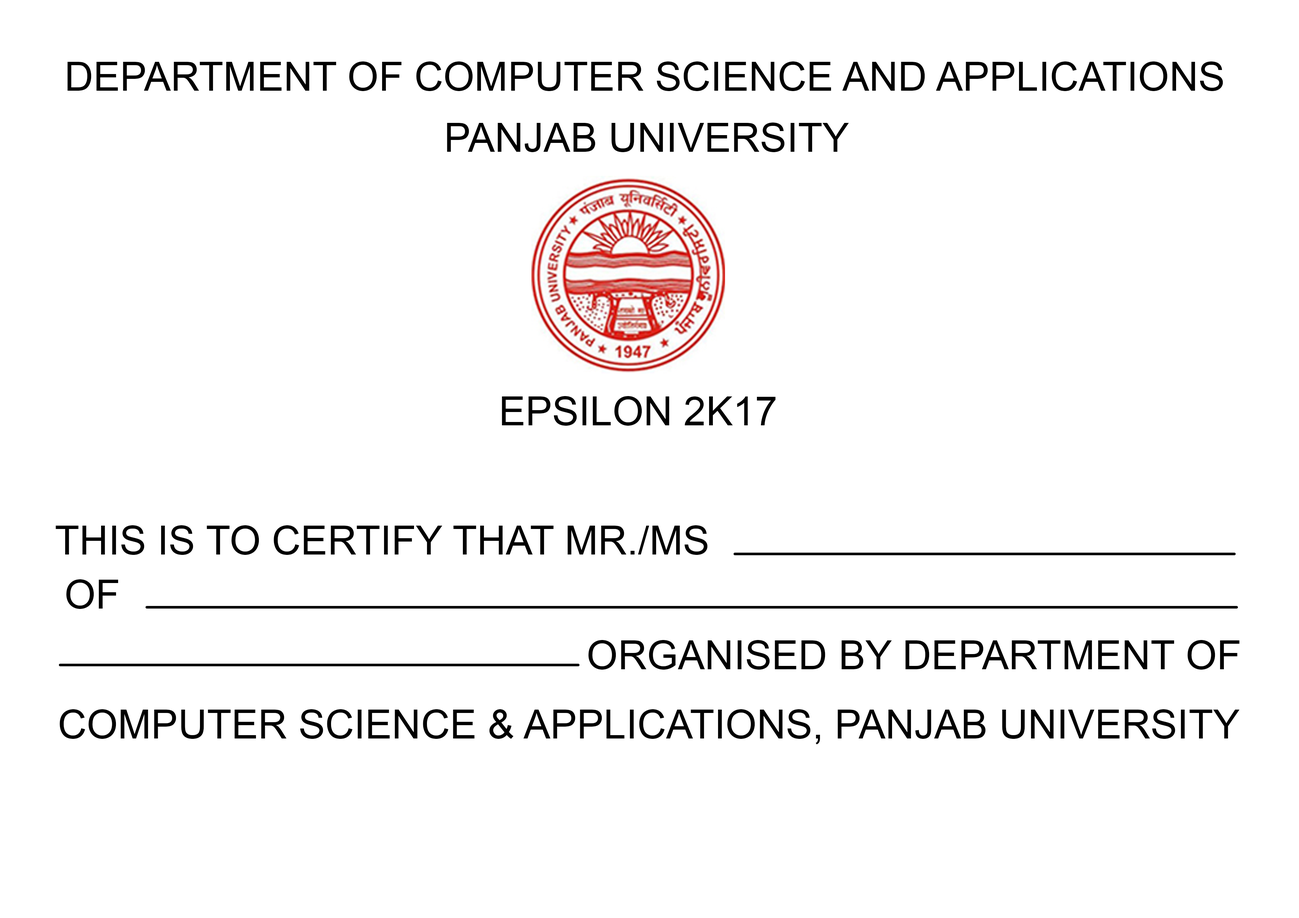
<style>
.page{position:relative;width:1299px;height:918px;background:#ffffff}
.page>*{position:absolute;margin:0}
.t1{font:40.1px "ArialMT";color:#000000}
</style>
<div class="page">
<p class="t1" style="left:67px;top:61px;width:1156px;height:30px">DEPARTMENT OF COMPUTER SCIENCE AND APPLICATIONS</p>
<p class="t1" style="left:447px;top:123px;width:402px;height:29px">PANJAB UNIVERSITY</p>
<p class="t1" style="left:502px;top:396px;width:274px;height:30px">EPSILON 2K17</p>
<p class="t1" style="left:56px;top:525px;width:651px;height:30px">THIS IS TO CERTIFY THAT MR./MS</p>
<p class="t1" style="left:66px;top:579px;width:52px;height:30px">OF</p>
<p class="t1" style="left:588px;top:640px;width:651px;height:30px">ORGANISED BY DEPARTMENT OF</p>
<p class="t1" style="left:60px;top:709px;width:1180px;height:36px">COMPUTER SCIENCE &amp; APPLICATIONS, PANJAB UNIVERSITY</p>
</div>
